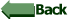
<style>
.page{position:relative;width:70px;height:19px;background:#ffffff}
.page>*{position:absolute;margin:0}
.t1{font:14px "Tahoma-Bold";letter-spacing:-0.05em;color:#003300}
</style>
<div class="page">
<p class="t1" style="left:36px;top:3px;width:32px;height:12px">Back</p>
</div>
